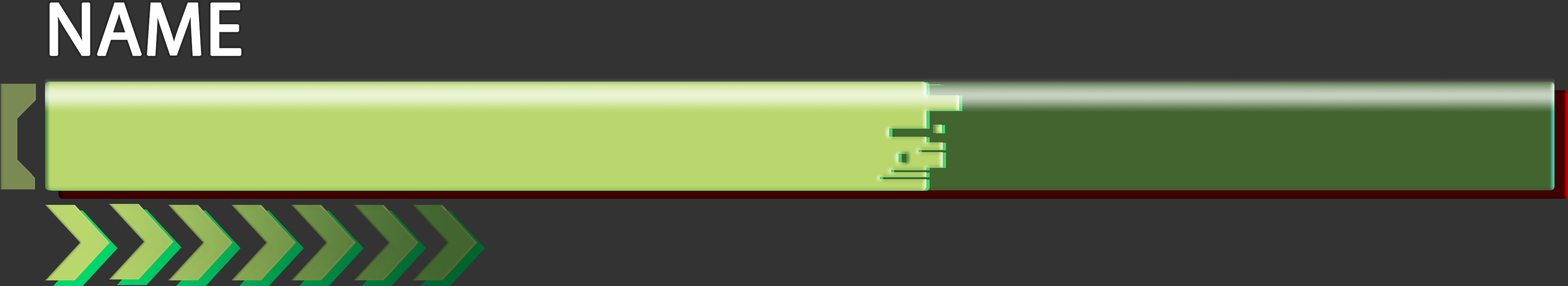
<style>
.page{position:relative;width:1568px;height:286px;background:#333333}
.page>*{position:absolute;margin:0}
.t1{font:75.7px "MyriadPro-Regular";letter-spacing:-0.01em;color:#ffffff;font-weight:bold}
</style>
<div class="page">
<p class="t1" style="left:49px;top:2px;width:193px;height:54px">NAME</p>
</div>
